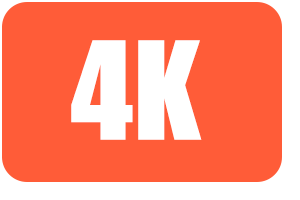
<style>
.page{position:relative;width:300px;height:200px;background:#ff5c38}
.page>*{position:absolute;margin:0}
.t1{font:125.4px "Impact";color:#ffffff}
</style>
<div class="page">
<p class="t1" style="left:71px;top:40px;width:131px;height:100px">4K</p>
</div>
